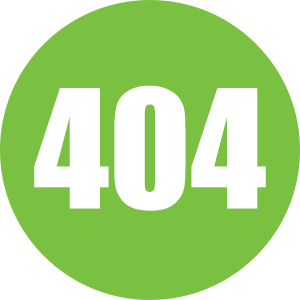
<style>
.page{position:relative;width:300px;height:300px;background:#7ac142}
.page>*{position:absolute;margin:0}
.t1{font:152px "Impact";color:#ffffff}
</style>
<div class="page">
<p class="t1" style="left:34px;top:85px;width:232px;height:126px">404</p>
</div>
